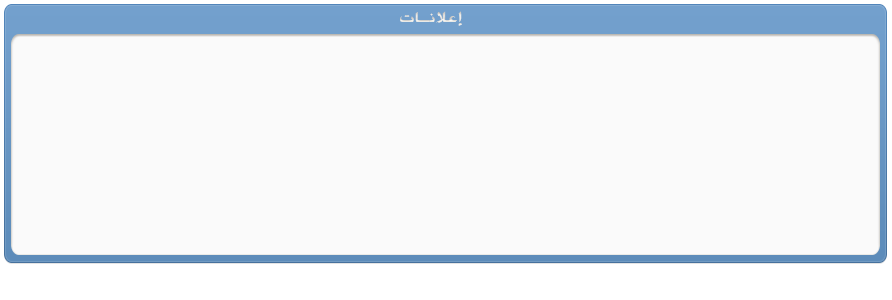
<style>
.page{position:relative;width:892px;height:300px;background:#fafafa}
.page>*{position:absolute;margin:0}
.t1{font:16px "BoutrosAdsMedium";color:#eaeae7}
</style>
<div class="page">
<p class="t1" style="left:400px;top:11px;width:62px;height:15px">إعلانـات</p>
</div>
